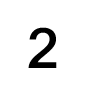
<style>
.page{position:relative;width:100px;height:100px;background:#ffffff}
.page>*{position:absolute;margin:0}
.t1{font:60px "Shruti-Bold";color:#000000}
</style>
<div class="page">
<p class="t1" style="left:28px;top:27px;width:29px;height:41px">2</p>
</div>
